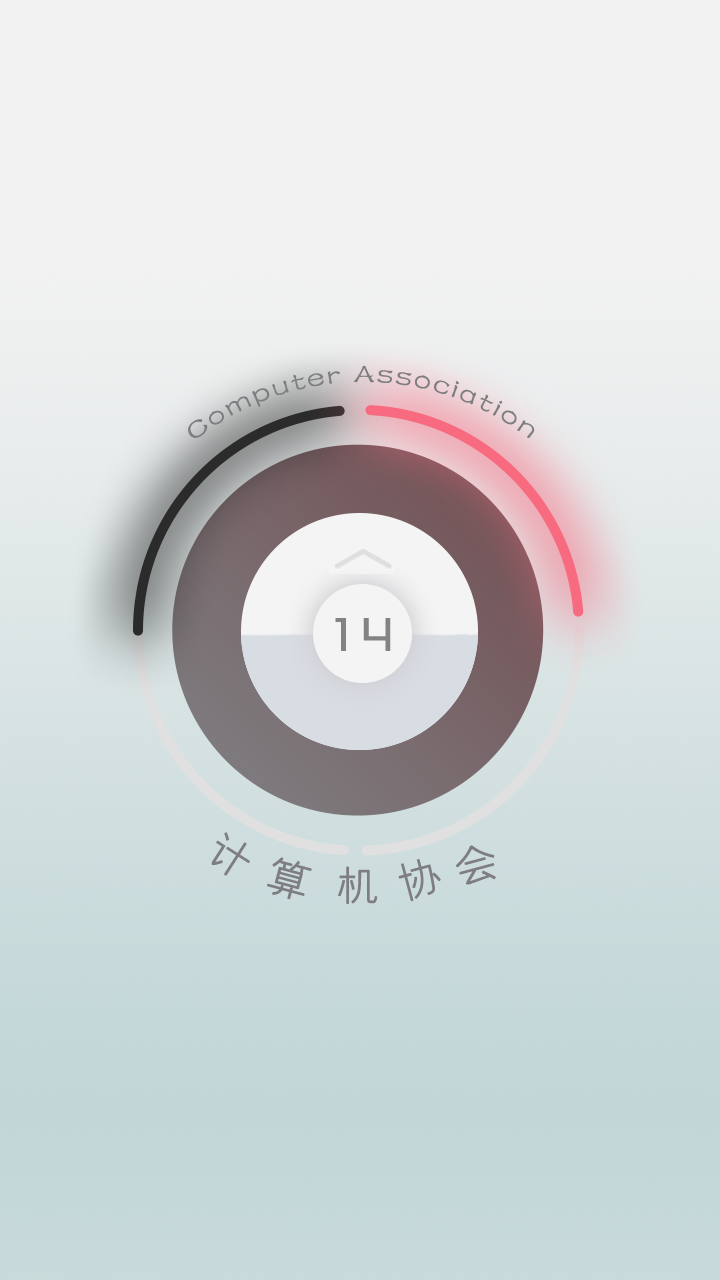
<style>
.page{position:relative;width:720px;height:1280px}
.page>*{position:absolute;margin:0}
.t1{font:27.9px/40.6px "FZSTK--GBK1-0";letter-spacing:0.1em;color:#7e7e81}
.t2{font:46.7px "BigYoungBoldGB2.0";letter-spacing:0.1em;color:#838383}
.t3{font:42px "JYouXian";letter-spacing:0.1em;color:#7e7e81;font-weight:bold}
</style>
<div class="page">
<p class="t1" style="left:188px;top:365px;width:347px;height:73px">Computer Association</p>
<p class="t2" style="left:335px;top:618px;width:56px;height:33px">14</p>
<p class="t3" style="left:211px;top:832px;width:39px;height:44px;rotate:33deg">计</p>
<p class="t3" style="left:455px;top:845px;width:41px;height:40px;rotate:-15deg">会</p>
<p class="t3" style="left:267px;top:857px;width:45px;height:43px;rotate:15deg">算</p>
<p class="t3" style="left:338px;top:866px;width:40px;height:38px">机</p>
<p class="t3" style="left:398px;top:859px;width:43px;height:43px;rotate:-15deg">协</p>
</div>
